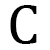
<style>
.page{position:relative;width:50px;height:50px;background:#ffffff}
.page>*{position:absolute;margin:0}
.t1{font:58.3px "CambriaMath";color:#000000}
</style>
<div class="page">
<p class="t1" style="left:10px;top:5px;width:27px;height:39px">C</p>
</div>
